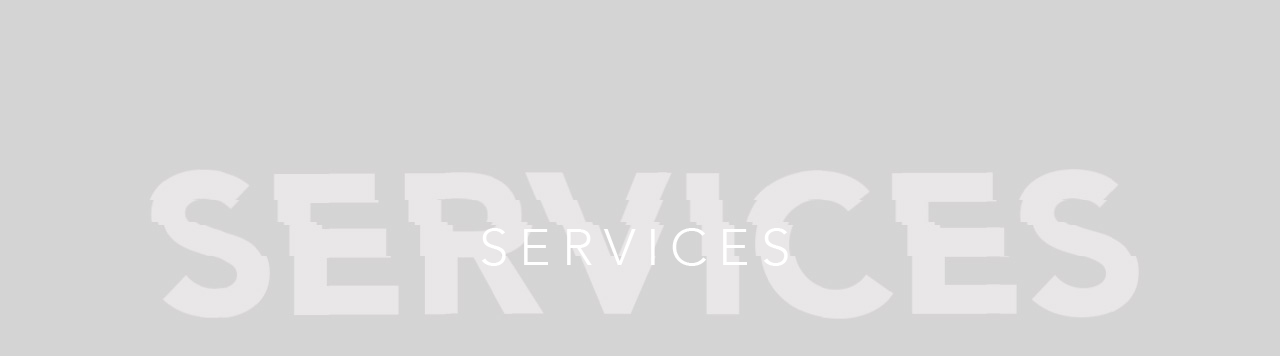
<style>
.page{position:relative;width:1280px;height:356px;background:#d4d4d4}
.page>*{position:absolute;margin:0}
.t1{font:50.7px "Avenir-Light";letter-spacing:0.2em;color:#ffffff;text-transform:uppercase;scale:1.05 1}
</style>
<div class="page">
<p class="t1" style="left:481px;top:228px;width:307px;height:38px">SERVICES</p>
</div>
